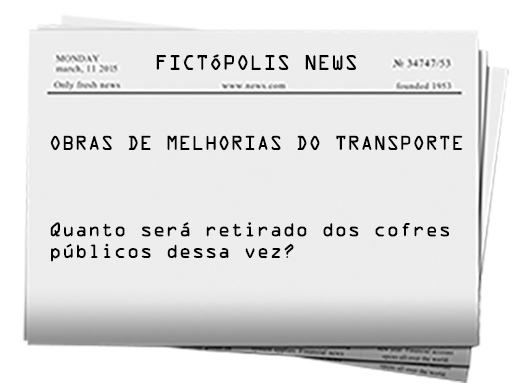
<style>
.page{position:relative;width:512px;height:387px;background:#ededed}
.page>*{position:absolute;margin:0}
.t1{font:18.8px "OCRAStd";color:#000000}
.t2{font:18px "OCRAStd";color:#000000}
</style>
<div class="page">
<p class="t1" style="left:156px;top:54px;width:200px;height:16px">FICTÓPOLIS NEWS</p>
<p class="t2" style="left:50px;top:135px;width:413px;height:127px">OBRAS DE MELHORIAS DO TRANSPORTE<br><br><br><br>Quanto será retirado dos cofres<br>públicos dessa vez?</p>
</div>
